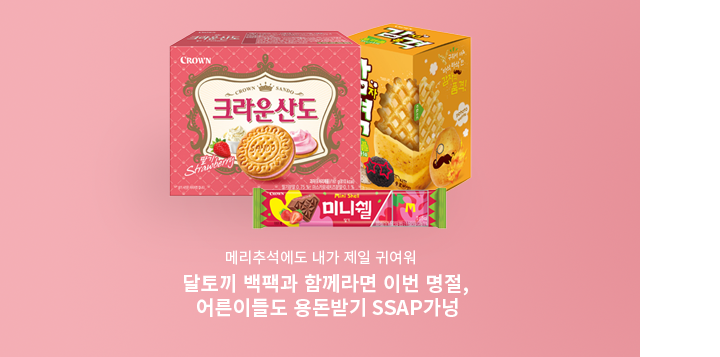
<style>
.page{position:relative;width:720px;height:357px}
.page>*{position:absolute;margin:0}
.t1{font:15px "NotoSansKR-Regular";color:#ffffff}
.t2{font:20px "NotoSansKR-Bold";color:#ffffff}
</style>
<div class="page">
<p class="t1" style="left:226px;top:250px;width:189px;height:15px">메리추석에도 내가 제일 귀여워</p>
<p class="t2" style="left:184px;top:274px;width:284px;height:43px;text-align:center">달토끼 백팩과 함께라면 이번 명절, <br>어른이들도 용돈받기 SSAP가넝</p>
</div>
